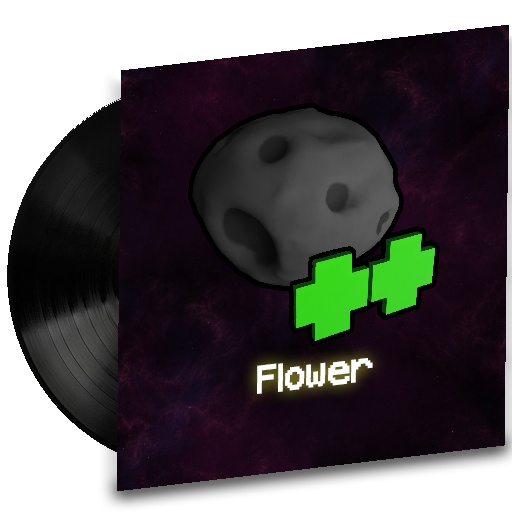
<style>
.page{position:relative;width:512px;height:512px;background:#ffffff}
.page>*{position:absolute;margin:0}
.t1{font:41.1px "VCRosdNEUE";color:#ffffff;scale:0.93 1}
</style>
<div class="page">
<p class="t1" style="left:257px;top:358px;width:116px;height:36px;rotate:-7deg">Flower</p>
</div>
